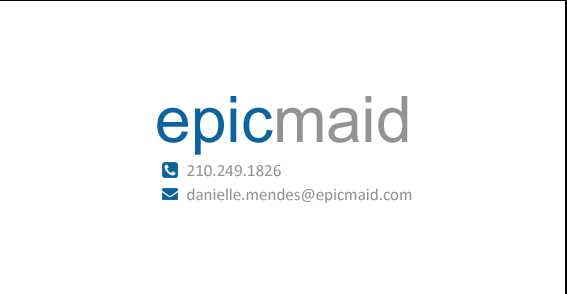
<style>
.page{position:relative;width:567px;height:294px;background:#ffffff}
.page>*{position:absolute;margin:0}
.t1{font:64px "ArialMT";color:#0d639e}
.t2{font:64px "ArialMT";color:#949391}
.t3{font:17px/24px "Calibri";color:#949391}
</style>
<div class="page">
<p class="t1" style="left:157px;top:96px;width:251px;height:59px">epic<span class="t2">maid</span></p>
<p class="t3" style="left:187px;top:165px;width:225px;height:38px">210.249.1826<br>danielle.mendes@epicmaid.com</p>
</div>
